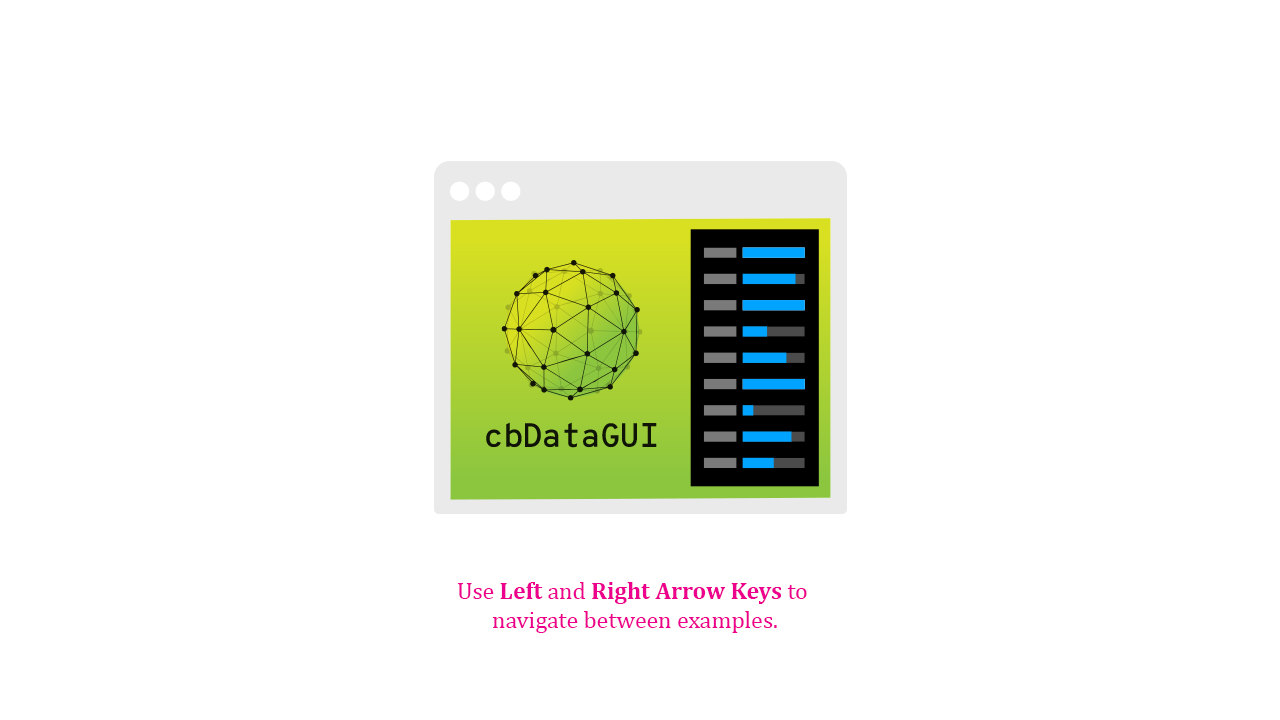
<style>
.page{position:relative;width:1280px;height:720px;background:#ffffff}
.page>*{position:absolute;margin:0}
.t1{font:24px "Cambria";color:#ec008c}
.t2{font:24px "Cambria-Bold";color:#ec008c}
</style>
<div class="page">
<p class="t1" style="left:457px;top:582px;width:350px;height:51px;text-align:center">Use <span class="t2">Left </span>and<span class="t2"> Right Arrow Keys</span> to <br>navigate between examples.</p>
</div>
